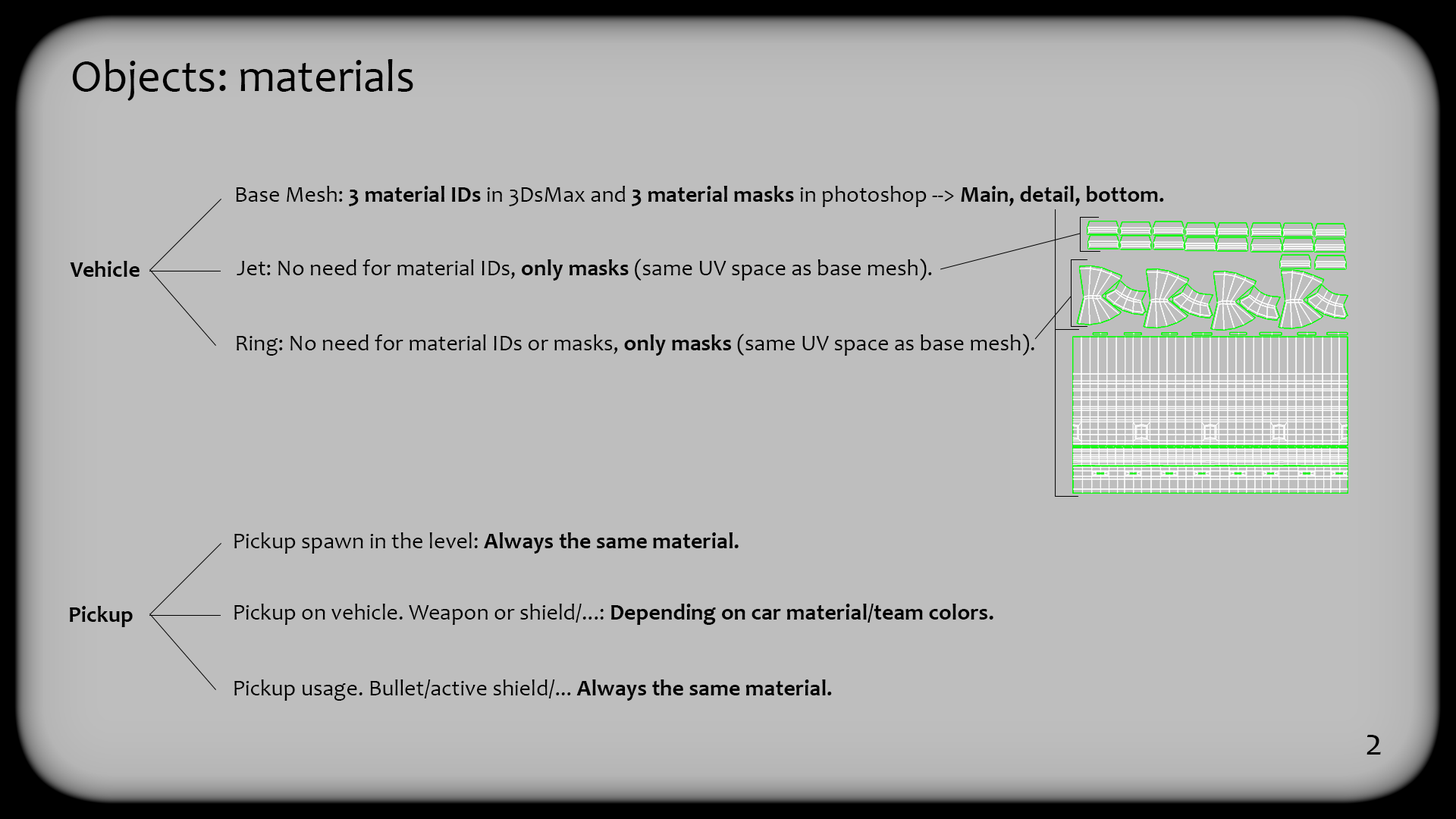
<style>
.page{position:relative;width:1456px;height:819px;background:#bebebe}
.page>*{position:absolute;margin:0}
.t1{font:45.5px "Candara";color:#010101}
.t2{font:22.7px "Candara-Bold";color:#000000}
.t3{font:22.7px "Candara";color:#000000}
.t4{font:37.9px "Candara";color:#000000}
</style>
<div class="page">
<p class="t1" style="left:72px;top:59px;width:341px;height:42px">Objects: materials</p>
<p class="t2" style="left:236px;top:186px;width:928px;height:21px"><span class="t3">Base Mesh: </span>3 material IDs<span class="t3"> in 3DsMax and </span>3 material masks<span class="t3"> in photoshop --&gt; </span>Main, detail, bottom.</p>
<p class="t2" style="left:70px;top:261px;width:70px;height:16px">Vehicle</p>
<p class="t3" style="left:237px;top:259px;width:695px;height:22px">Jet: No need for material IDs, <span class="t2">only masks</span> (same UV space as base mesh).</p>
<p class="t3" style="left:237px;top:334px;width:797px;height:22px">Ring: No need for material IDs or masks, <span class="t2">only masks</span> (same UV space as base mesh).</p>
<p class="t3" style="left:234px;top:532px;width:505px;height:22px">Pickup spawn in the level: <span class="t2">Always the same material.</span></p>
<p class="t2" style="left:70px;top:606px;width:63px;height:21px">Pickup</p>
<p class="t3" style="left:234px;top:604px;width:759px;height:21px">Pickup on vehicle. Weapon or shield/...: <span class="t2">Depending on car material/team colors.</span></p>
<p class="t3" style="left:234px;top:679px;width:598px;height:22px">Pickup usage. Bullet/active shield/... <span class="t2">Always the same material.</span></p>
<p class="t4" style="left:1366px;top:735px;width:15px;height:20px">2</p>
</div>
